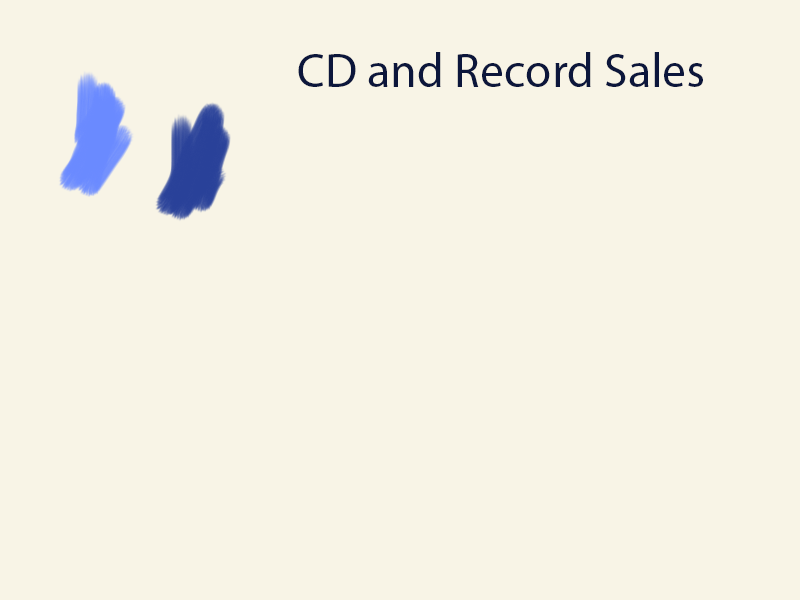
<style>
.page{position:relative;width:800px;height:600px;background:#f8f4e6}
.page>*{position:absolute;margin:0}
.t1{font:48px "MyriadPro-Regular";color:#0c163b}
</style>
<div class="page">
<p class="t1" style="left:298px;top:52px;width:405px;height:35px">CD and Record Sales</p>
</div>
